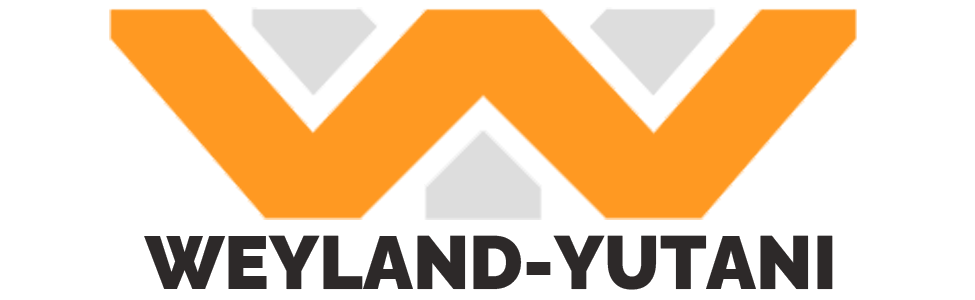
<style>
.page{position:relative;width:975px;height:300px;background:#ffffff}
.page>*{position:absolute;margin:0}
.t1{font:75px "RalewayRoman-Black";color:#2d2929}
</style>
<div class="page">
<p class="t1" style="left:144px;top:235px;width:689px;height:55px">WEYLAND-YUTANI</p>
</div>
